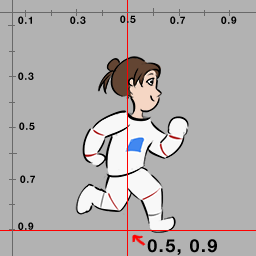
<style>
.page{position:relative;width:256px;height:256px;background:#b2b2b2}
.page>*{position:absolute;margin:0}
.t1{font:10px "HelveticaNeue-Bold";letter-spacing:0.08em;color:#000000}
.t2{font:18px "HelveticaNeue-Bold";letter-spacing:0.08em;color:#000000}
</style>
<div class="page">
<p class="t1" style="left:18px;top:16px;width:14px;height:8px">0.1</p>
<p class="t1" style="left:70px;top:16px;width:16px;height:8px">0.3</p>
<p class="t1" style="left:120px;top:15px;width:16px;height:8px">0.5</p>
<p class="t1" style="left:170px;top:16px;width:15px;height:8px">0.7</p>
<p class="t1" style="left:221px;top:16px;width:16px;height:8px">0.9</p>
<p class="t1" style="left:18px;top:72px;width:16px;height:8px">0.3</p>
<p class="t1" style="left:19px;top:122px;width:16px;height:8px">0.5</p>
<p class="t1" style="left:20px;top:175px;width:15px;height:8px">0.7</p>
<p class="t1" style="left:18px;top:222px;width:16px;height:8px">0.9</p>
<p class="t2" style="left:147px;top:239px;width:70px;height:16px">0.5, 0.9</p>
</div>
